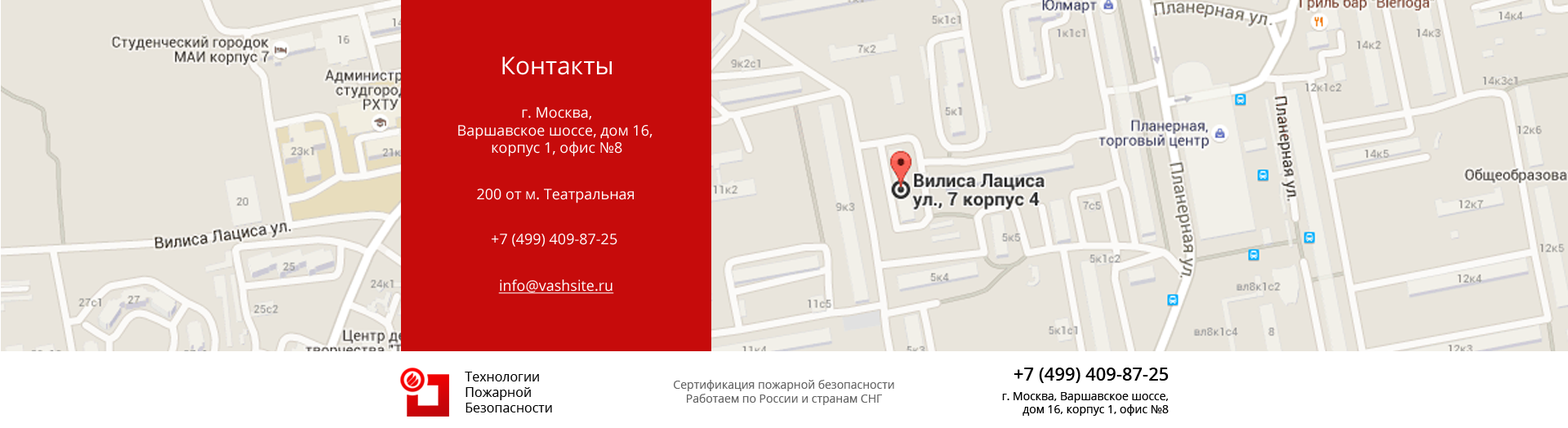
<style>
.page{position:relative;width:1568px;height:428px;background:#e9e5dc}
.page>*{position:absolute;margin:0}
.t1{font:24.5px "OpenSans";color:#ffffff}
.t2{font:14.7px "OpenSans";color:#ffffff}
.t3{font:14.7px "OpenSans";color:#ffffff;text-decoration:underline}
.t4{font:13.1px "OpenSans";color:#000000}
.t5{font:18px "OpenSans-Semibold";color:#000000}
.t6{font:11.4px "OpenSans";color:#666666}
.t7{font:11.4px "OpenSans";color:#000000}
</style>
<div class="page">
<p class="t1" style="left:502px;top:56px;width:110px;height:19px">Контакты</p>
<p class="t2" style="left:458px;top:107px;width:195px;height:50px;text-align:center">г. Москва,<br>Варшавское шоссе, дом 16, <br>корпус 1, офис №8</p>
<p class="t2" style="left:477px;top:189px;width:157px;height:14px">200 от м. Театральная</p>
<p class="t2" style="left:492px;top:234px;width:125px;height:13px">+7 (499) 409-87-25</p>
<p class="t3" style="left:498px;top:279px;width:116px;height:15px">info@vashsite.ru</p>
<p class="t4" style="left:465px;top:372px;width:87px;height:40px">Технологии<br>Пожарной<br>Безопасности</p>
<p class="t5" style="left:1014px;top:368px;width:155px;height:15px">+7 (499) 409-87-25</p>
<p class="t6" style="left:674px;top:380px;width:220px;height:25px;text-align:center">Сертификация пожарной безопасности<br>Работаем по России и странам СНГ</p>
<p class="t7" style="left:1002px;top:392px;width:167px;height:24px;text-align:right">г. Москва, Варшавское шоссе,<br>дом 16, корпус 1, офис №8</p>
</div>
